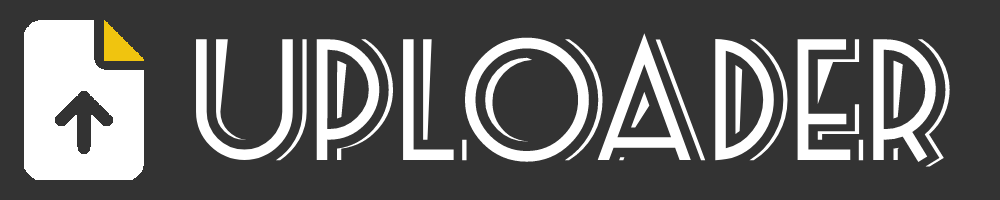
<style>
.page{position:relative;width:1000px;height:200px;background:#333333}
.page>*{position:absolute;margin:0}
.t1{font:140px "SeasideResortNF";color:#ffffff}
</style>
<div class="page">
<p class="t1" style="left:196px;top:33px;width:754px;height:134px">UPLOADER</p>
</div>
